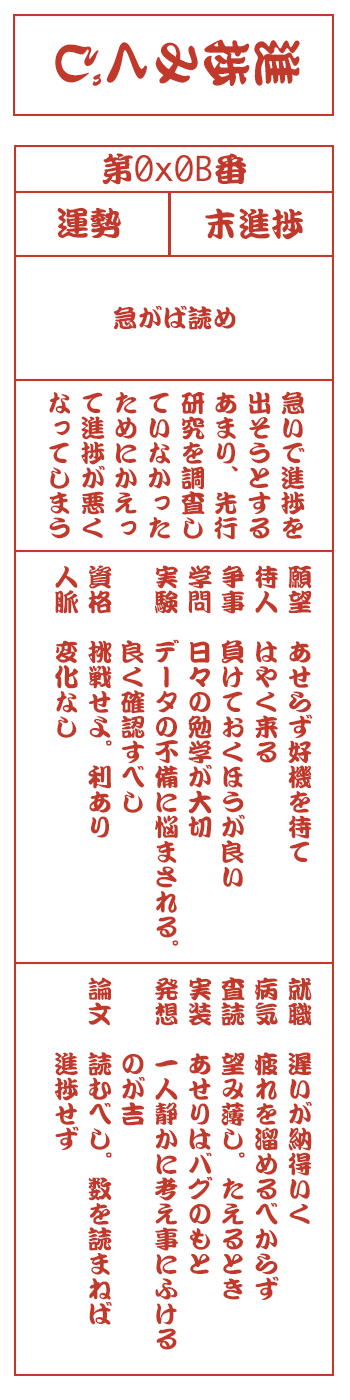
<style>
.page{position:relative;width:350px;height:1400px;background:#ffffff}
.page>*{position:absolute;margin:0}
.t1{font:50px "DFKanTeiRyu-XB-MP-RKSJ-H";color:#c0392b}
.t2{font:33.3px "Monaco";color:#c0392b}
.t3{font:33.3px "DFKanTeiRyu-XB-MP-RKSJ-H";color:#c0392b}
.t4{font:25px "DFKanTeiRyu-XB-MP-RKSJ-H";color:#c0392b}
.t5{font:25px/33.3px "DFKanTeiRyu-XB-MP-RKSJ-H";color:#c0392b}
</style>
<div class="page">
<p class="t1" style="left:55px;top:39px;width:245px;height:47px;rotate:90deg">進捗みくじ</p>
<p class="t2" style="left:102px;top:153px;width:144px;height:32px"><span class="t3">第</span>0x0B<span class="t3">番</span></p>
<p class="t3" style="left:57px;top:207px;width:64px;height:31px">運勢</p>
<p class="t3" style="left:205px;top:208px;width:98px;height:32px">末進捗</p>
<p class="t4" style="left:113px;top:305px;width:123px;height:25px">急がば読め</p>
<p class="t5" style="left:49px;top:391px;width:256px;height:149px">急いで進捗を<br>出そうとする<br>あまり、先行<br>研究を調査し<br>ていなかった<br>ためにかえっ<br>て進捗が悪く<br>なってしまう</p>
<p class="t5" style="left:55px;top:565px;width:257px;height:381px">願望　あせらず好機を待て<br>待人　はやく来る<br>争事　負けておくほうが良い<br>学問　日々の勉学が大切<br>実験　データの不備に悩まされる。<br>　　　良く確認すべし<br>資格　挑戦せよ。利あり<br>人脈　変化なし</p>
<p class="t5" style="left:54px;top:977px;width:258px;height:373px">就職　遅いが納得いく<br>病気　疲れを溜めるべからず<br>査読　望み薄し。たえるとき<br>実装　あせりはバグのもと<br>発想　一人静かに考え事にふける<br>　　　のが吉<br>論文　読むべし。数を読まねば<br>　　　進捗せず</p>
</div>
